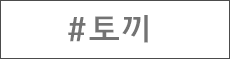
<style>
.page{position:relative;width:230px;height:59px;background:#ffffff}
.page>*{position:absolute;margin:0}
.t1{font:36px "HaanYGodic23";color:#737373}
</style>
<div class="page">
<p class="t1" style="left:68px;top:15px;width:80px;height:28px">#토끼</p>
</div>
